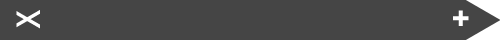
<style>
.page{position:relative;width:500px;height:40px;background:#454545}
.page>*{position:absolute;margin:0}
.t1{font:30px "CaviarDreams-Bold";letter-spacing:-0.08em;color:#ffffff}
.t2{font:36px "CaviarDreams-Bold";letter-spacing:-0.08em;color:#ffffff}
</style>
<div class="page">
<p class="t1" style="left:16px;top:10px;width:24px;height:19px;rotate:-90deg">X</p>
<p class="t2" style="left:453px;top:10px;width:16px;height:16px">+</p>
</div>
